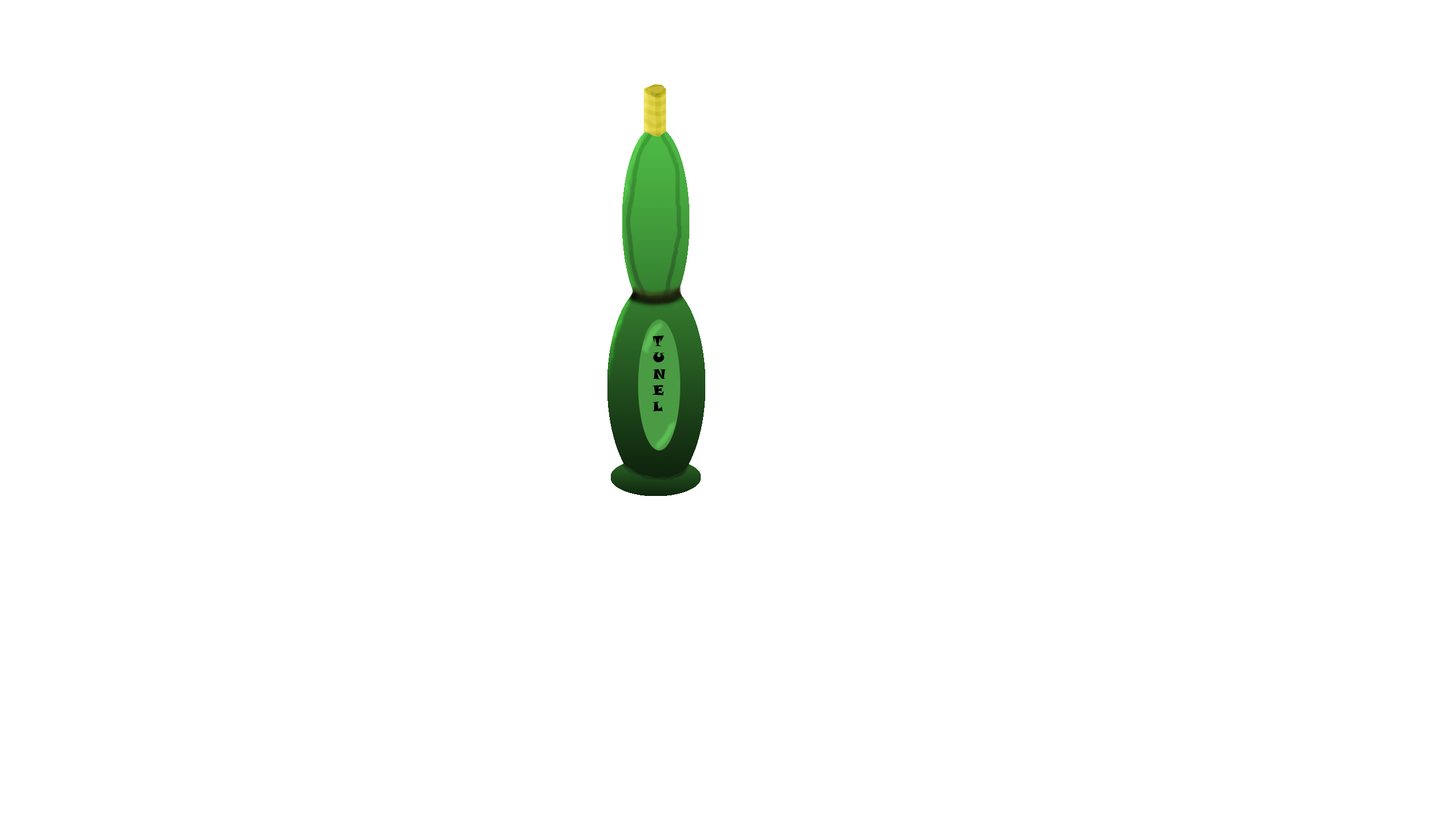
<style>
.page{position:relative;width:1456px;height:819px;background:#ffffff}
.page>*{position:absolute;margin:0}
.t1{font:13.7px "SnapITC-Regular";color:#000000}
</style>
<div class="page">
<p class="t1" style="left:652px;top:336px;width:14px;height:76px">T<br>U<br>N<br>E<br>L</p>
</div>
